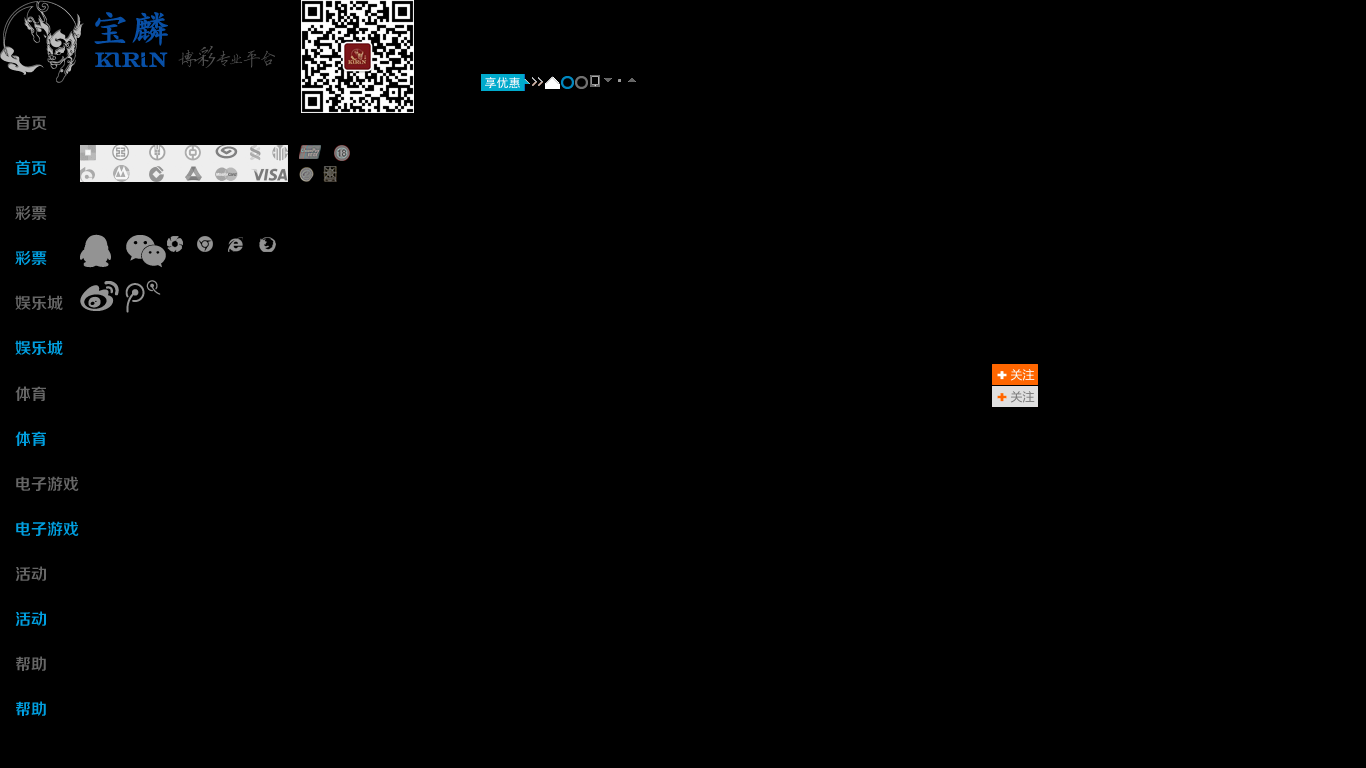
<style>
.page{position:relative;width:1366px;height:768px;background:#000000}
.page>*{position:absolute;margin:0}
.t1{font:16px "FZZZHONGJW--GB1-0";color:#666666}
.t2{font:16px "FZZZHONGJW--GB1-0";color:#009fe0}
</style>
<div class="page">
<p class="t1" style="left:15px;top:115px;width:32px;height:15px">首页</p>
<p class="t2" style="left:15px;top:160px;width:32px;height:15px">首页</p>
<p class="t1" style="left:15px;top:206px;width:32px;height:14px">彩票</p>
<p class="t2" style="left:15px;top:251px;width:32px;height:14px">彩票</p>
<p class="t1" style="left:15px;top:295px;width:48px;height:15px">娱乐城</p>
<p class="t2" style="left:15px;top:340px;width:48px;height:15px">娱乐城</p>
<p class="t1" style="left:15px;top:386px;width:31px;height:15px">体育</p>
<p class="t2" style="left:15px;top:431px;width:31px;height:15px">体育</p>
<p class="t1" style="left:16px;top:476px;width:63px;height:15px">电子游戏</p>
<p class="t2" style="left:16px;top:521px;width:63px;height:15px">电子游戏</p>
<p class="t1" style="left:15px;top:566px;width:31px;height:15px">活动</p>
<p class="t2" style="left:15px;top:611px;width:31px;height:15px">活动</p>
<p class="t1" style="left:16px;top:656px;width:30px;height:15px">帮助</p>
<p class="t2" style="left:16px;top:701px;width:30px;height:15px">帮助</p>
</div>
